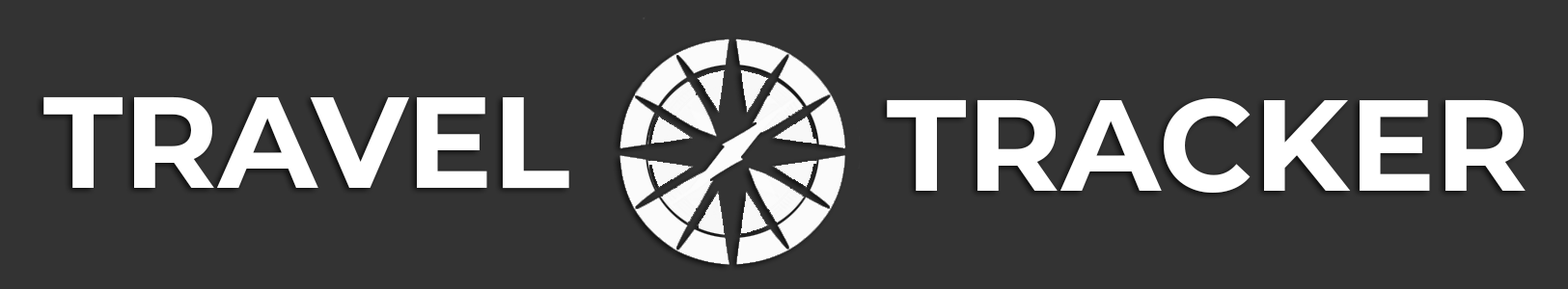
<style>
.page{position:relative;width:1568px;height:289px;background:#333333}
.page>*{position:absolute;margin:0}
.t1{font:128.9px "Montserrat-Bold";color:#ffffff}
</style>
<div class="page">
<p class="t1" style="left:43px;top:96px;width:526px;height:93px">TRAVEL</p>
<p class="t1" style="left:887px;top:98px;width:639px;height:95px">TRACKER</p>
</div>
